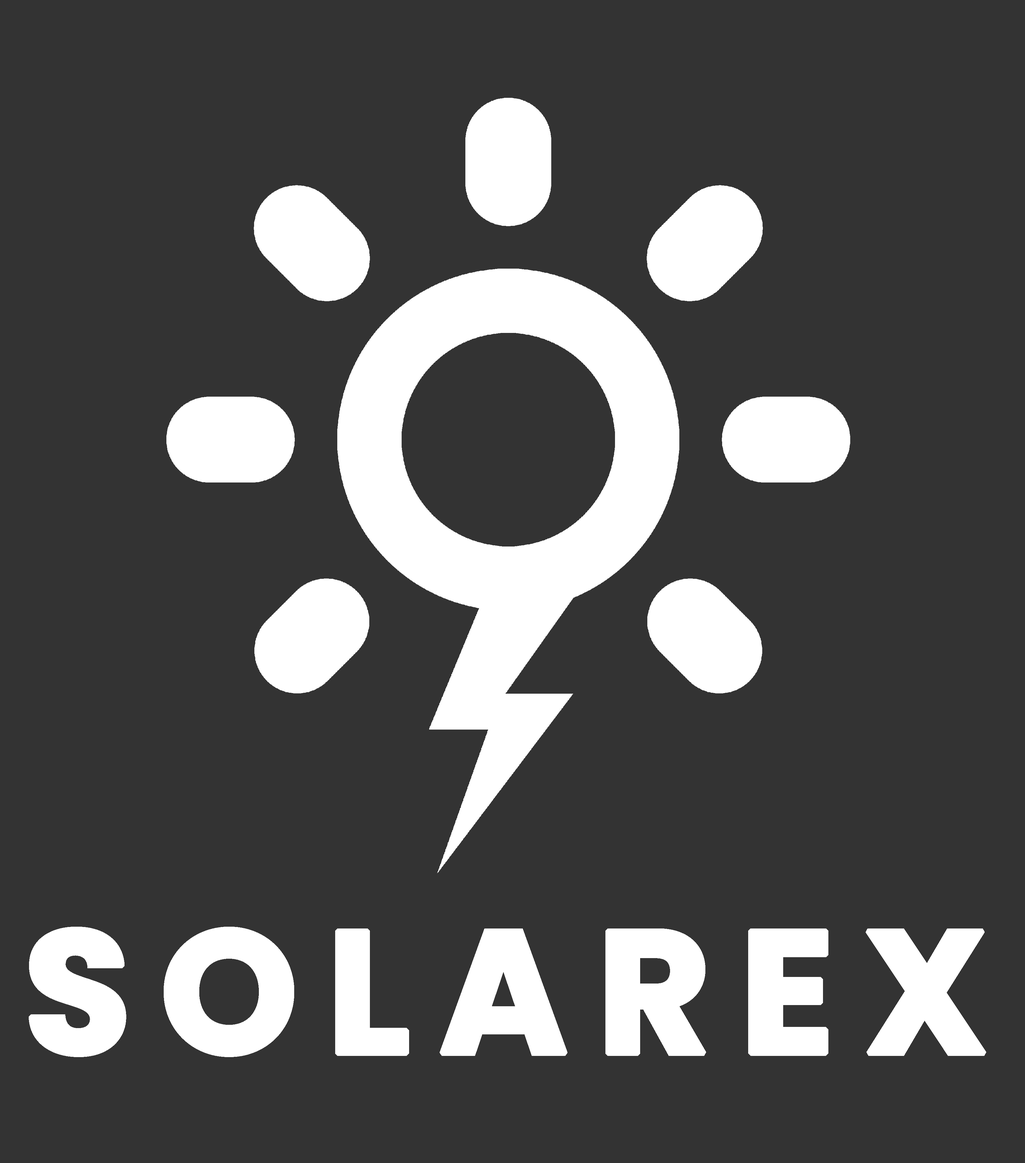
<style>
.page{position:relative;width:1025px;height:1163px;background:#333333}
.page>*{position:absolute;margin:0}
.t1{font:174.6px "Poppins-Bold";letter-spacing:0.14em;color:#ffffff;font-weight:bold}
</style>
<div class="page">
<p class="t1" style="left:29px;top:927px;width:957px;height:131px">SOLAREX</p>
</div>
